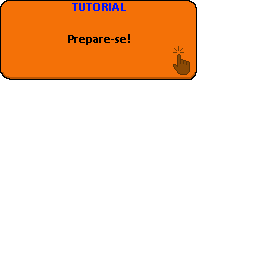
<style>
.page{position:relative;width:256px;height:256px;background:#ffffff}
.page>*{position:absolute;margin:0}
.t1{font:12.5px "Calibri-Bold";color:#000000}
</style>
<div class="page">
<p class="t1" style="left:68px;top:34px;width:62px;height:11px">Prepare-se!</p>
</div>
